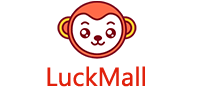
<style>
.page{position:relative;width:200px;height:90px;background:#ffffff}
.page>*{position:absolute;margin:0}
.t1{font:24px "MicrosoftYaHei";color:#e1210c}
</style>
<div class="page">
<p class="t1" style="left:47px;top:66px;width:98px;height:21px">LuckMall</p>
</div>
